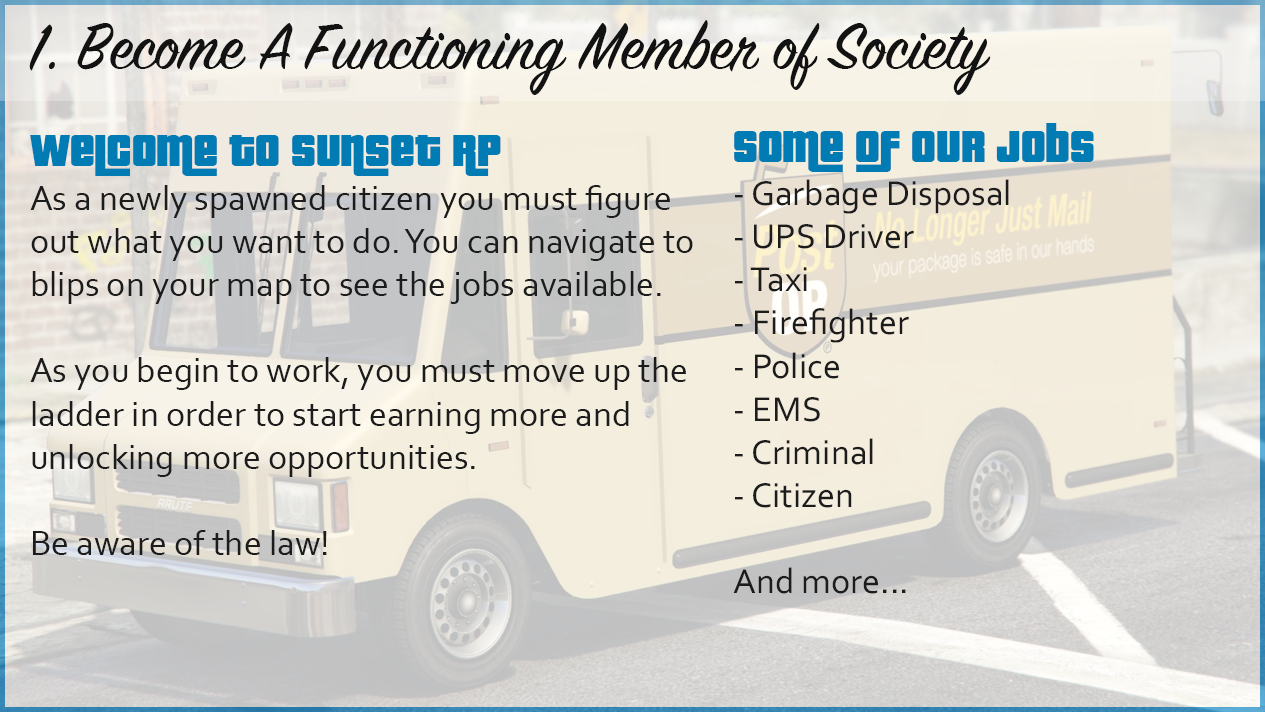
<style>
.page{position:relative;width:1265px;height:712px}
.page>*{position:absolute;margin:0}
.t1{font:72px "SignPainterHouseScript";color:#121212}
.t2{font:36px "Corbel";color:#1c1c1c}
.t3{font:48px "PricedownBl-Regular";color:#007bb4}
</style>
<div class="page">
<p class="t1" style="left:29px;top:20px;width:962px;height:75px">1. Become A Functioning Member of Society</p>
<p class="t2" style="left:733px;top:123px;width:361px;height:471px"><span class="t3">Some of our jobs<br></span>- Garbage Disposal<br>- UPS Driver<br>- Taxi<br>- Firefighter<br>- Police<br>- EMS<br>- Criminal<br>- Citizen<br><br>And more...</p>
<p class="t2" style="left:30px;top:135px;width:663px;height:420px"><span class="t3">Welcome to Sunset RP<br></span>As a newly spawned citizen you must figure out what you want to do. You can navigate to blips on your map to see the jobs available. <br><br>As you begin to work, you must move up the ladder in order to start earning more and unlocking more opportunities. <br><br>Be aware of the law!</p>
</div>
